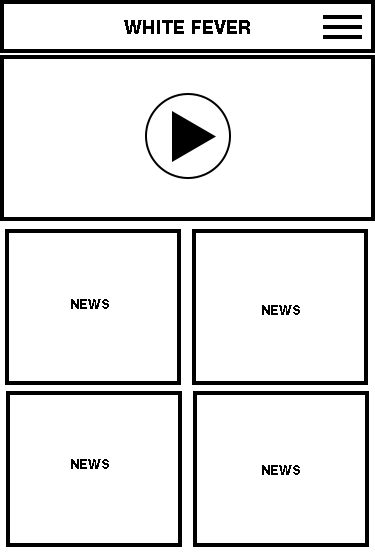
<style>
.page{position:relative;width:375px;height:559px;background:#ffffff}
.page>*{position:absolute;margin:0}
.t1{font:18.3px "HelveticaNeue-Heavy";color:#000000}
.t2{font:13px "HelveticaNeue-Heavy";color:#000000}
</style>
<div class="page">
<p class="t1" style="left:124px;top:20px;width:126px;height:14px">WHITE FEVER</p>
<p class="t2" style="left:71px;top:299px;width:38px;height:10px">NEWS</p>
<p class="t2" style="left:262px;top:305px;width:38px;height:10px">NEWS</p>
<p class="t2" style="left:71px;top:459px;width:38px;height:10px">NEWS</p>
<p class="t2" style="left:262px;top:465px;width:38px;height:10px">NEWS</p>
</div>
